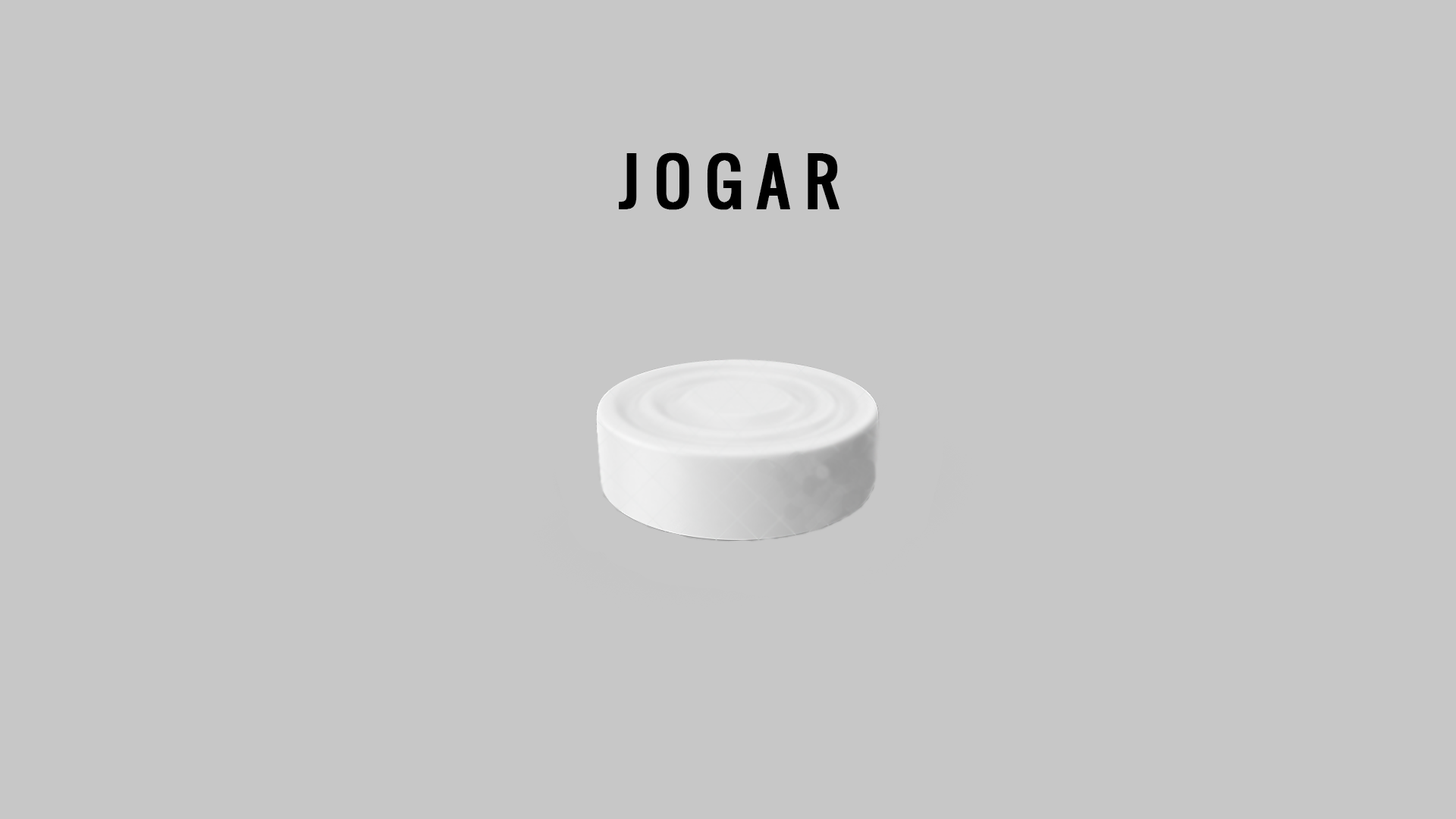
<style>
.page{position:relative;width:1456px;height:819px;background:#c7c7c7}
.page>*{position:absolute;margin:0}
.t1{font:91px "Oswald-Regular";letter-spacing:0.2em;color:#000000;font-variant:small-caps;font-weight:bold}
</style>
<div class="page">
<p class="t1" style="left:619px;top:152px;width:220px;height:58px">jogar</p>
</div>
